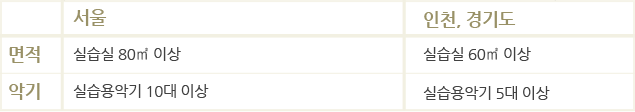
<style>
.page{position:relative;width:635px;height:112px;background:#ffffff}
.page>*{position:absolute;margin:0}
.t1{font:18px "NanumGothicBold";letter-spacing:-0.025em;color:#999167}
.t2{font:15px "NanumGothic";letter-spacing:-0.025em;color:#414141}
</style>
<div class="page">
<p class="t1" style="left:73px;top:9px;width:34px;height:17px">서울</p>
<p class="t1" style="left:424px;top:11px;width:92px;height:17px">인천, 경기도</p>
<p class="t1" style="left:9px;top:46px;width:31px;height:17px">면적</p>
<p class="t2" style="left:73px;top:47px;width:108px;height:14px">실습실 80㎡ 이상</p>
<p class="t2" style="left:423px;top:47px;width:108px;height:14px">실습실 60㎡ 이상</p>
<p class="t1" style="left:9px;top:83px;width:31px;height:17px">악기</p>
<p class="t2" style="left:73px;top:84px;width:136px;height:14px">실습용악기 10대 이상</p>
<p class="t2" style="left:423px;top:86px;width:127px;height:14px">실습용악기 5대 이상</p>
</div>
